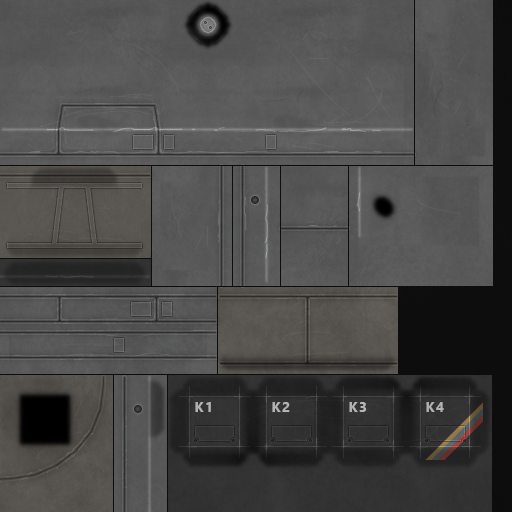
<style>
.page{position:relative;width:512px;height:512px}
.page>*{position:absolute;margin:0}
.t1{font:14px "SegoeUI-Bold";letter-spacing:0.1em;color:#b3b3b3}
</style>
<div class="page">
<p class="t1" style="left:195px;top:402px;width:16px;height:10px">K1</p>
<p class="t1" style="left:272px;top:402px;width:18px;height:10px">K2</p>
<p class="t1" style="left:349px;top:402px;width:18px;height:10px">K3</p>
<p class="t1" style="left:426px;top:402px;width:18px;height:10px">K4</p>
</div>
